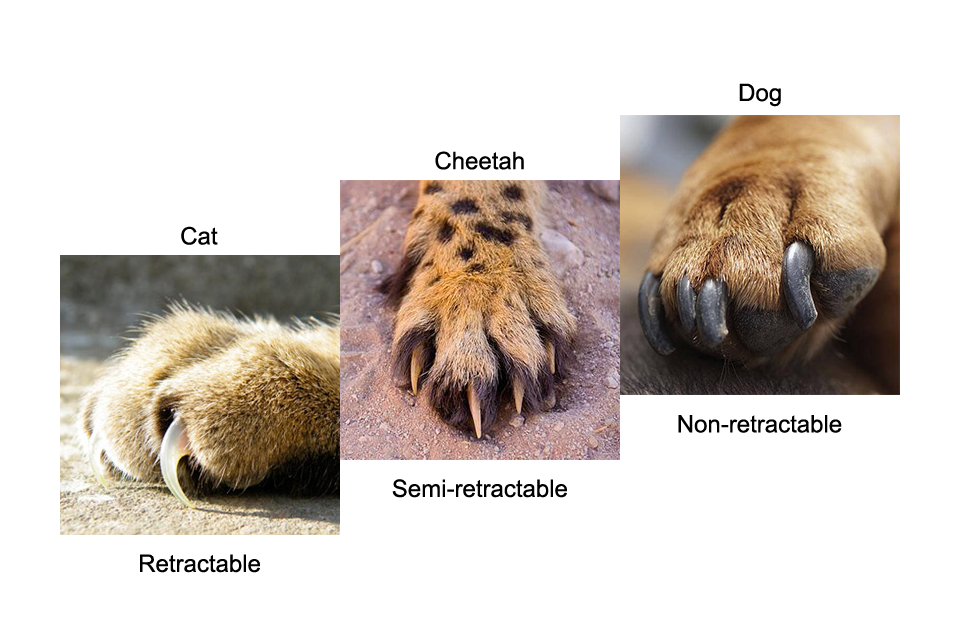
<style>
.page{position:relative;width:960px;height:640px;background:#ffffff}
.page>*{position:absolute;margin:0}
.t1{font:24px "ArialMT";color:#000000}
</style>
<div class="page">
<p class="t1" style="left:739px;top:83px;width:42px;height:24px">Dog</p>
<p class="t1" style="left:435px;top:151px;width:89px;height:19px">Cheetah</p>
<p class="t1" style="left:181px;top:226px;width:37px;height:19px">Cat</p>
<p class="t1" style="left:678px;top:415px;width:164px;height:18px">Non-retractable</p>
<p class="t1" style="left:392px;top:479px;width:175px;height:19px">Semi-retractable</p>
<p class="t1" style="left:140px;top:554px;width:120px;height:19px">Retractable</p>
</div>
